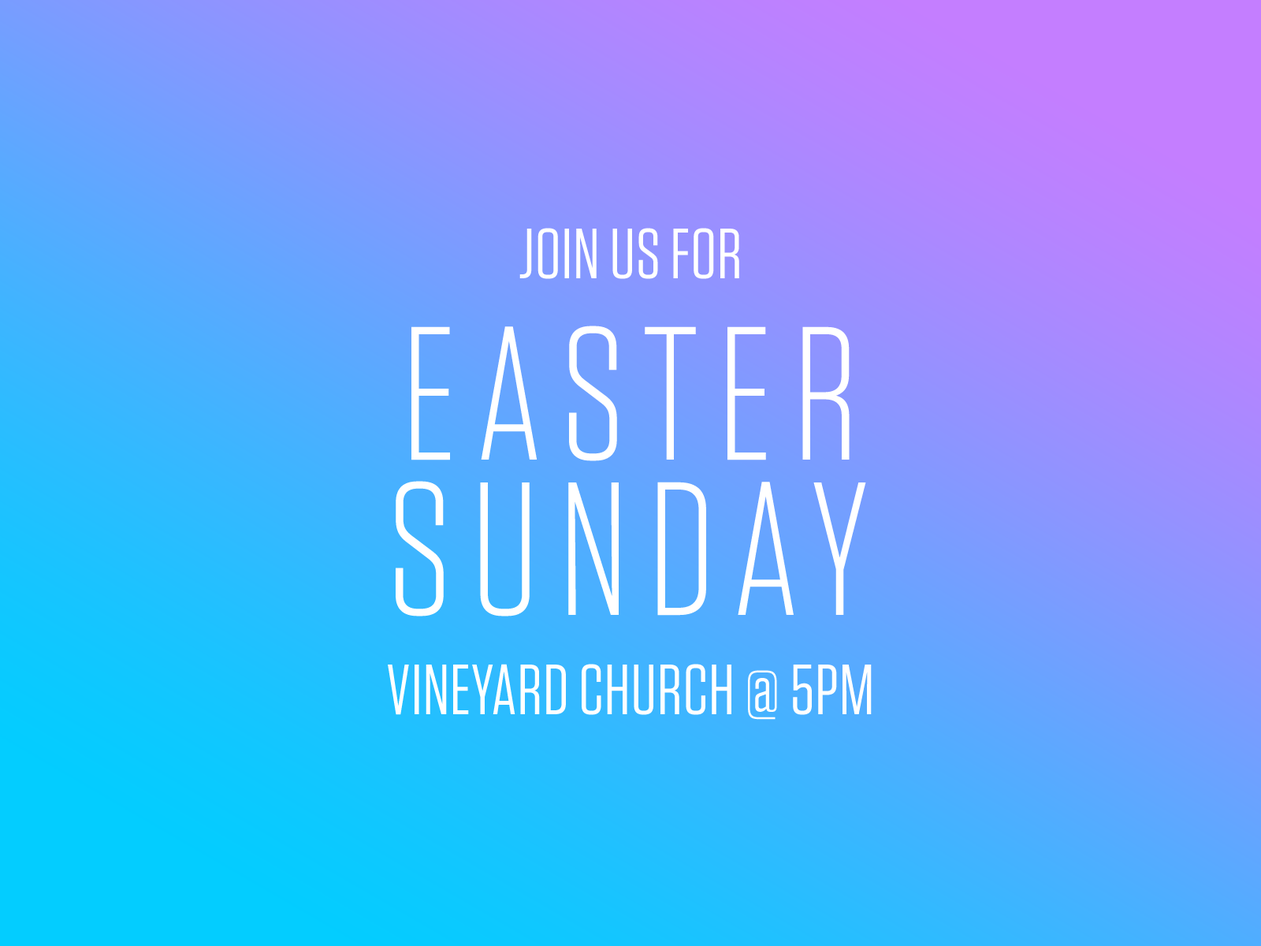
<style>
.page{position:relative;width:1261px;height:946px}
.page>*{position:absolute;margin:0}
.t1{font:70.9px "Tungsten-Book";letter-spacing:0.01em;color:#ffffff;text-transform:uppercase}
.t2{font:189.1px "Tungsten-Light";letter-spacing:0.1em;color:#ffffff;text-transform:uppercase}
</style>
<div class="page">
<p class="t1" style="left:519px;top:228px;width:220px;height:51px">join us for</p>
<p class="t2" style="left:411px;top:325px;width:439px;height:136px">Easter</p>
<p class="t2" style="left:396px;top:481px;width:470px;height:135px">sunday</p>
<p class="t1" style="left:388px;top:664px;width:484px;height:56px">vineyard church @ 5pm</p>
</div>
